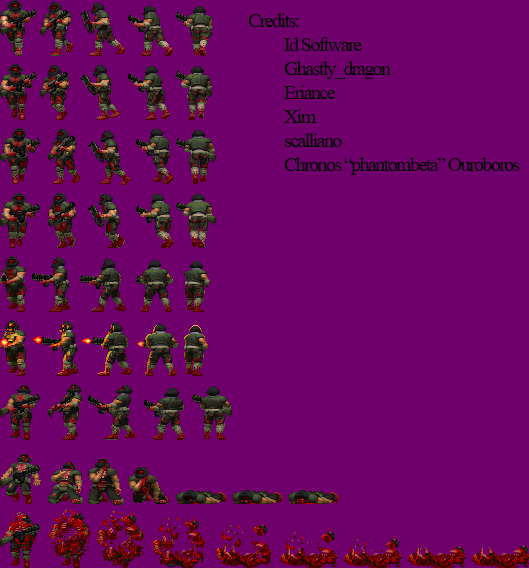
<style>
.page{position:relative;width:529px;height:568px;background:#6f006b}
.page>*{position:absolute;margin:0}
.t1{font:20px "TimesNewRomanPSMT";letter-spacing:-0.08em;color:#000000}
</style>
<div class="page">
<p class="t1" style="left:248px;top:13px;width:272px;height:162px">Credits:<br> Id Software<br> Ghastly_dragon<br> Eriance<br> Xim<br> scalliano<br> Chronos “phantombeta” Ouroboros</p>
</div>
